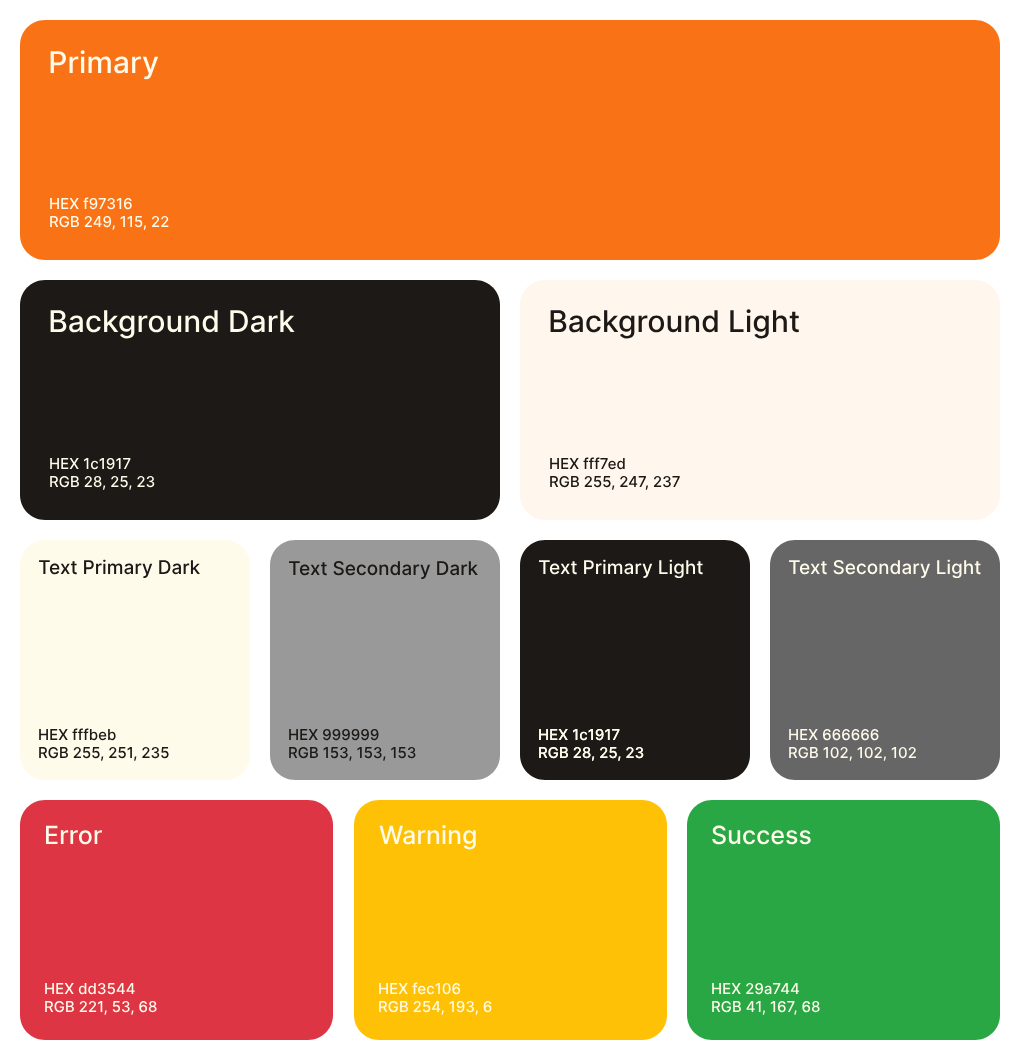
<style>
.page{position:relative;width:1020px;height:1060px;background:#f97316}
.page>*{position:absolute;margin:0}
.t1{font:30px "Inter-Medium";color:#fffbeb}
.t2{font:15px "Inter-Medium";color:#fffbeb}
.t3{font:30px "Inter-Medium";color:#1c1917}
.t4{font:15px "Inter-Medium";color:#1c1917}
.t5{font:19px "Inter-Medium";color:#1c1917}
.t6{font:19px "Inter-Medium";color:#fffbeb}
.t7{font:25px "Inter-Medium";color:#fffbeb}
</style>
<div class="page">
<p class="t1" style="left:50px;top:50px;width:109px;height:30px">Primary</p>
<p class="t2" style="left:50px;top:197px;width:119px;height:33px">HEX f97316<br>RGB 249, 115, 22</p>
<p class="t1" style="left:50px;top:310px;width:245px;height:29px">Background Dark</p>
<p class="t3" style="left:550px;top:309px;width:249px;height:30px">Background Light</p>
<p class="t2" style="left:50px;top:457px;width:105px;height:33px">HEX 1c1917<br>RGB 28, 25, 23</p>
<p class="t4" style="left:550px;top:457px;width:130px;height:33px">HEX fff7ed<br>RGB 255, 247, 237</p>
<p class="t5" style="left:39px;top:559px;width:161px;height:19px">Text Primary Dark</p>
<p class="t5" style="left:289px;top:560px;width:189px;height:19px">Text Secondary Dark</p>
<p class="t6" style="left:539px;top:559px;width:164px;height:20px">Text Primary Light</p>
<p class="t6" style="left:789px;top:559px;width:192px;height:20px">Text Secondary Light</p>
<p class="t4" style="left:39px;top:728px;width:130px;height:33px">HEX fffbeb<br>RGB 255, 251, 235</p>
<p class="t4" style="left:289px;top:728px;width:127px;height:33px">HEX 999999<br>RGB 153, 153, 153</p>
<p class="t2" style="left:539px;top:728px;width:105px;height:33px">HEX 1c1917<br>RGB 28, 25, 23</p>
<p class="t2" style="left:539px;top:728px;width:105px;height:33px">HEX 1c1917<br>RGB 28, 25, 23</p>
<p class="t2" style="left:789px;top:728px;width:127px;height:33px">HEX 666666<br>RGB 102, 102, 102</p>
<p class="t7" style="left:45px;top:825px;width:57px;height:20px">Error</p>
<p class="t7" style="left:379px;top:825px;width:97px;height:25px">Warning</p>
<p class="t7" style="left:712px;top:825px;width:99px;height:20px">Success</p>
<p class="t2" style="left:45px;top:982px;width:112px;height:33px">HEX dd3544<br>RGB 221, 53, 68</p>
<p class="t2" style="left:379px;top:982px;width:113px;height:33px">HEX fec106<br>RGB 254, 193, 6</p>
<p class="t2" style="left:712px;top:982px;width:108px;height:33px">HEX 29a744<br>RGB 41, 167, 68</p>
</div>
